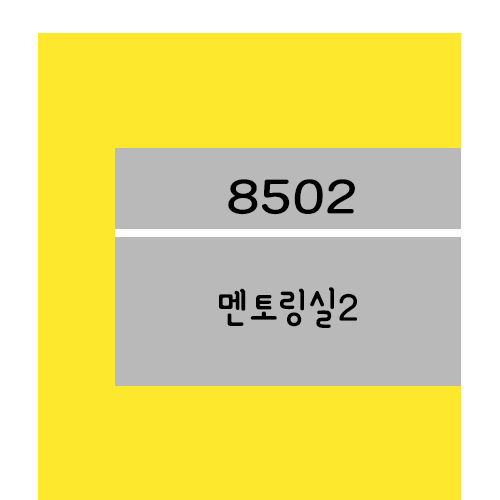
<style>
.page{position:relative;width:500px;height:500px;background:#fee82d}
.page>*{position:absolute;margin:0}
.t1{font:61.2px "YanoljaYacheR";color:#000000;scale:1.18 1}
.t2{font:48px "YanoljaYacheR";color:#000000}
</style>
<div class="page">
<p class="t1" style="left:228px;top:179px;width:127px;height:36px">8502</p>
<p class="t2" style="left:219px;top:287px;width:138px;height:41px">멘토링실2</p>
</div>
